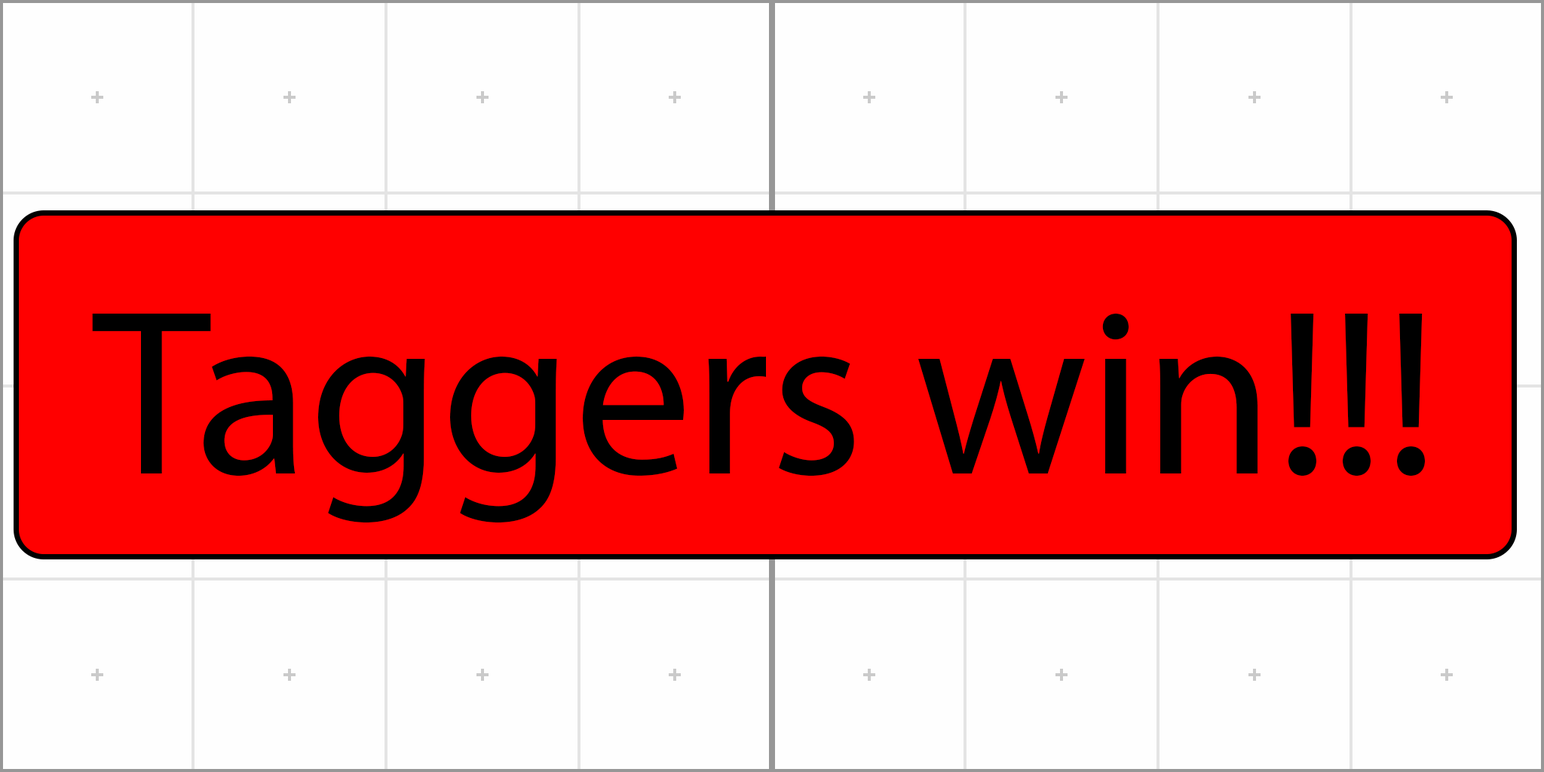
<style>
.page{position:relative;width:1544px;height:772px;background:#fefefe}
.page>*{position:absolute;margin:0}
.t1{font:236.8px "MyriadPro-Regular";color:#000000}
</style>
<div class="page">
<p class="t1" style="left:92px;top:314px;width:1333px;height:209px">Taggers win!!!</p>
</div>
